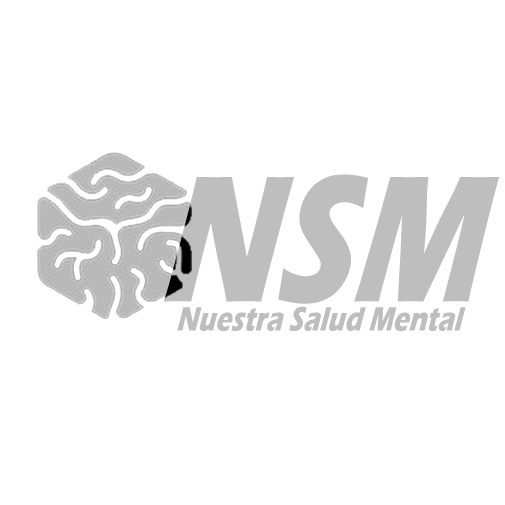
<style>
.page{position:relative;width:505px;height:505px;background:#ffffff}
.page>*{position:absolute;margin:0}
.t1{font:191.1px "ErasITC-Bold";color:#bebebe;scale:0.73 1}
.t2{font:36px "ErasITC-Bold";color:#bebebe;scale:0.73 1}
</style>
<div class="page">
<p class="t1" style="left:164px;top:174px;width:335px;height:130px">NSM</p>
<p class="t2" style="left:177px;top:306px;width:289px;height:25px">Nuestra Salud Mental</p>
</div>
